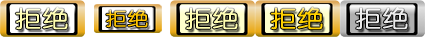
<style>
.page{position:relative;width:425px;height:37px}
.page>*{position:absolute;margin:0}
.t1{font:23.3px "YouYuan";color:#fffeb0;font-weight:bold;scale:1.14 1}
.t2{font:18.6px "YouYuan";color:#ffc600;font-weight:bold;scale:1.14 1}
.t3{font:23.3px "YouYuan";color:#ffd100;font-weight:bold;scale:1.14 1}
.t4{font:23.3px "YouYuan";color:#eaeaea;font-weight:bold;scale:1.14 1}
</style>
<div class="page">
<p class="t1" style="left:15px;top:7px;width:53px;height:23px">拒绝</p>
<p class="t2" style="left:106px;top:9px;width:42px;height:19px">拒绝</p>
<p class="t1" style="left:185px;top:7px;width:53px;height:23px">拒绝</p>
<p class="t3" style="left:270px;top:7px;width:53px;height:23px">拒绝</p>
<p class="t4" style="left:355px;top:7px;width:53px;height:23px">拒绝</p>
</div>
